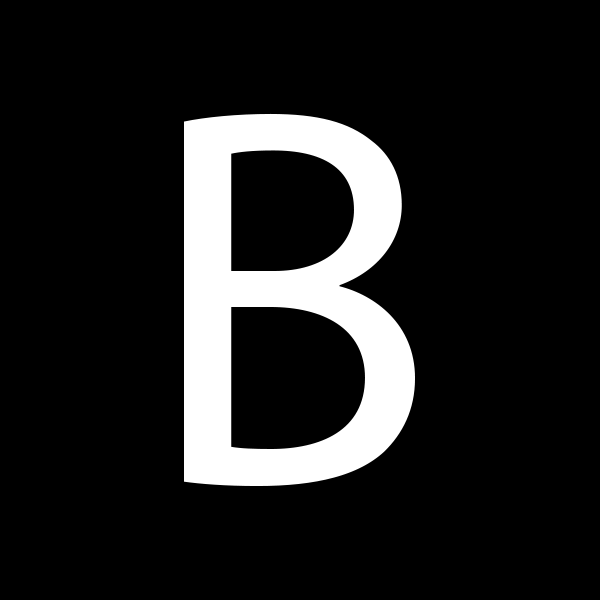
<style>
.page{position:relative;width:600px;height:600px;background:#000000}
.page>*{position:absolute;margin:0}
.t1{font:543.6px "MyriadPro-Regular";color:#ffffff}
</style>
<div class="page">
<p class="t1" style="left:184px;top:113px;width:231px;height:373px">B</p>
</div>
